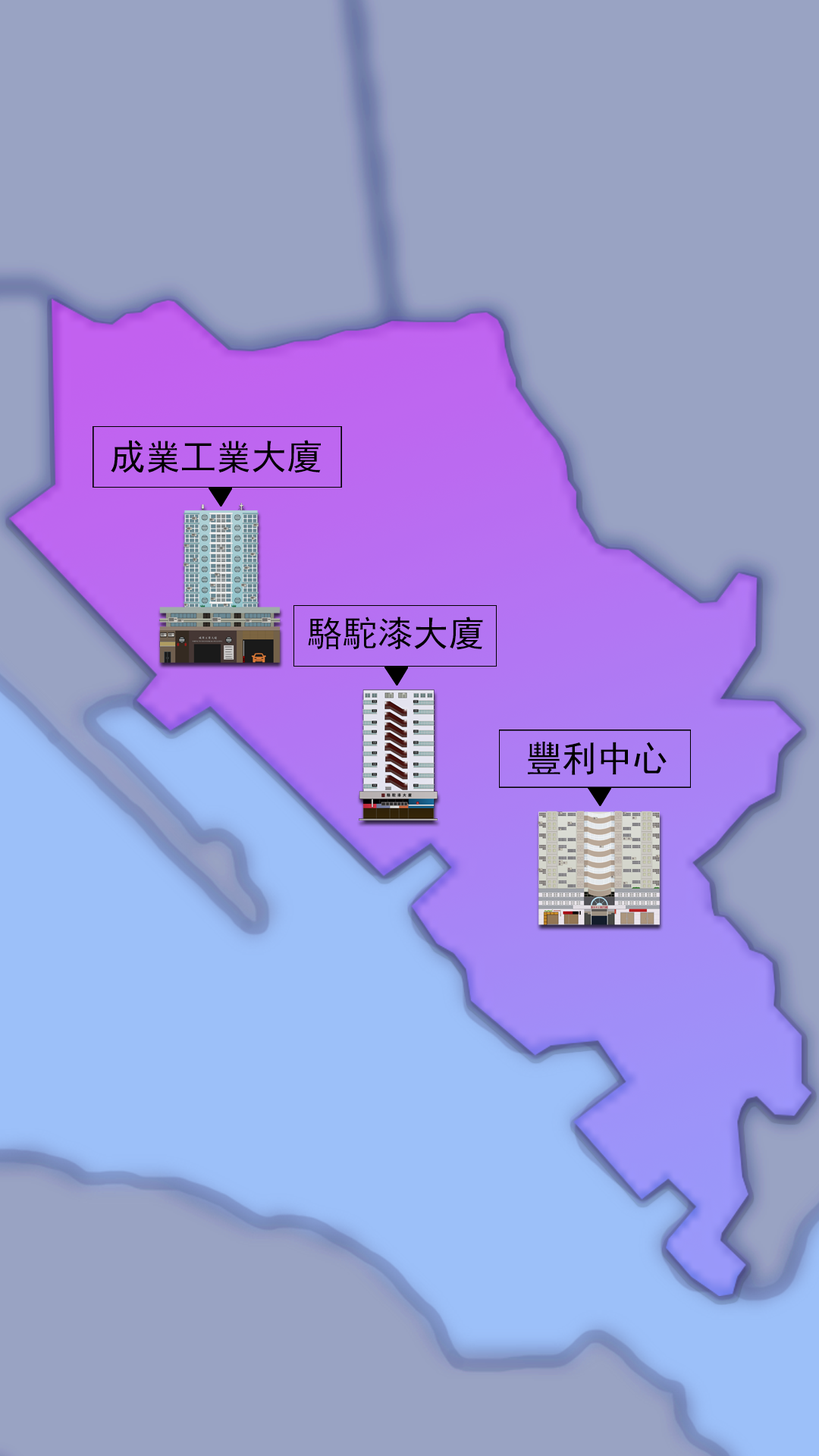
<style>
.page{position:relative;width:819px;height:1456px;background:#99a3c3}
.page>*{position:absolute;margin:0}
.t1{font:35.4px "SimHei";color:#000000}
</style>
<div class="page">
<p class="t1" style="left:111px;top:440px;width:210px;height:33px">成業工業大廈</p>
<p class="t1" style="left:308px;top:617px;width:175px;height:33px">駱駝漆大廈</p>
<p class="t1" style="left:528px;top:742px;width:139px;height:33px">豐利中心</p>
</div>
